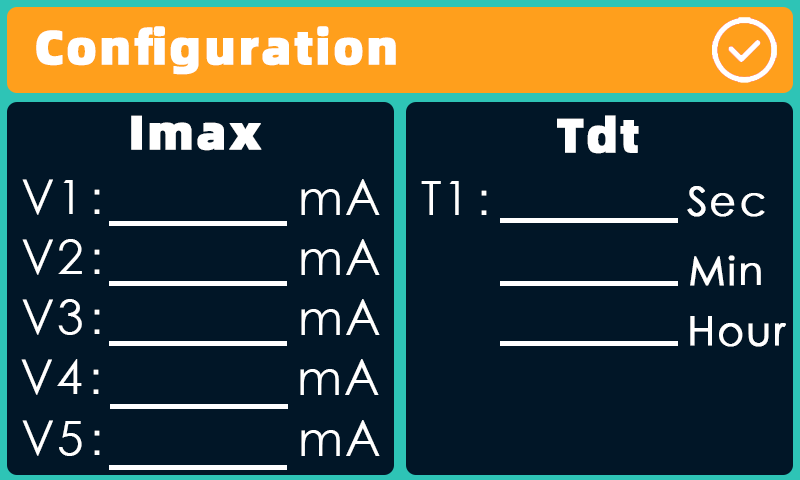
<style>
.page{position:relative;width:800px;height:480px;background:#011627}
.page>*{position:absolute;margin:0}
.t1{font:48px "Alibaba-PuHuiTi-H";letter-spacing:0.04em;color:#ffffff;font-weight:bold}
.t2{font:48px "STXihei";letter-spacing:0.04em;color:#ffffff}
.t3{font:40px "STXihei";letter-spacing:0.04em;color:#ffffff;font-weight:bold}
</style>
<div class="page">
<p class="t1" style="left:36px;top:26px;width:360px;height:49px">Configuration</p>
<p class="t1" style="left:131px;top:115px;width:131px;height:36px">Imax</p>
<p class="t1" style="left:557px;top:115px;width:82px;height:39px">Tdt</p>
<p class="t2" style="left:22px;top:179px;width:78px;height:36px">V1：</p>
<p class="t2" style="left:301px;top:179px;width:79px;height:36px">mA</p>
<p class="t2" style="left:421px;top:181px;width:66px;height:34px">T1：</p>
<p class="t3" style="left:687px;top:186px;width:78px;height:31px">Sec</p>
<p class="t2" style="left:22px;top:239px;width:78px;height:36px">V2：</p>
<p class="t2" style="left:301px;top:239px;width:79px;height:36px">mA</p>
<p class="t3" style="left:690px;top:255px;width:71px;height:31px">Min</p>
<p class="t2" style="left:22px;top:299px;width:78px;height:36px">V3：</p>
<p class="t2" style="left:301px;top:299px;width:79px;height:36px">mA</p>
<p class="t3" style="left:690px;top:316px;width:96px;height:31px">Hour</p>
<p class="t2" style="left:21px;top:359px;width:78px;height:36px">V4：</p>
<p class="t2" style="left:300px;top:359px;width:79px;height:36px">mA</p>
<p class="t2" style="left:22px;top:420px;width:78px;height:36px">V5：</p>
<p class="t2" style="left:301px;top:420px;width:79px;height:36px">mA</p>
</div>
